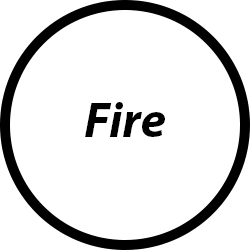
<style>
.page{position:relative;width:250px;height:250px;background:#ffffff}
.page>*{position:absolute;margin:0}
.t1{font:50px "MyriadPro-BoldIt";color:#000000}
</style>
<div class="page">
<p class="t1" style="left:85px;top:102px;width:80px;height:35px">Fire</p>
</div>
